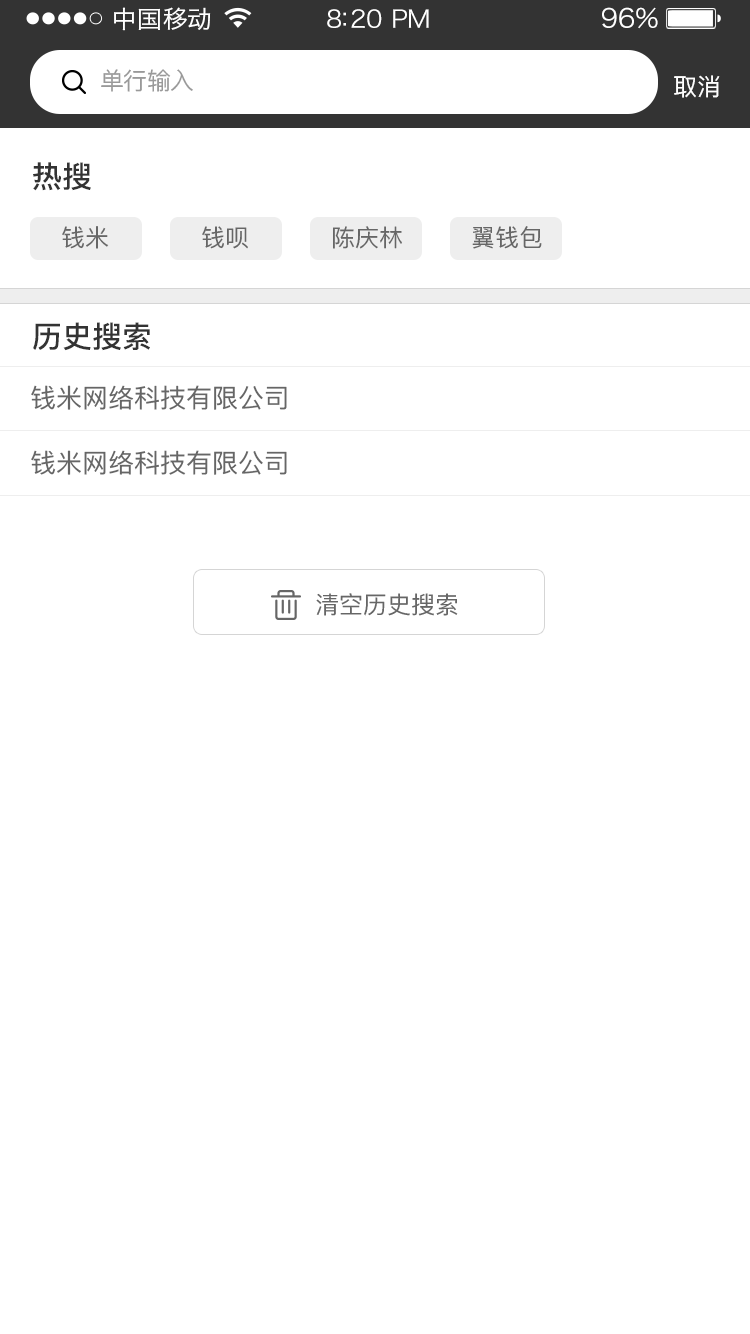
<style>
.page{position:relative;width:750px;height:1334px;background:#ffffff}
.page>*{position:absolute;margin:0}
.t1{font:24px "HiraginoSansGB-W3";letter-spacing:0.02em;color:#ffffff;scale:1.03 1}
.t2{font:24px "HiraginoSansGB-W3";letter-spacing:-0.02em;color:#ffffff;scale:1.03 1}
.t3{font:26.2px "HiraginoSansGB-W3";letter-spacing:-0.02em;color:#ffffff;scale:1.03 1}
.t4{font:24px "PingFangSC-Regular";letter-spacing:-0.02em;color:#999999}
.t5{font:24px "PingFangSC-Regular";letter-spacing:-0.02em;color:#ffffff}
.t6{font:30px "PingFangSC-Medium";color:#333333}
.t7{font:24px "PingFangSC-Regular";color:#666666}
.t8{font:26px "PingFangSC-Regular";color:#666666}
</style>
<div class="page">
<p class="t1" style="left:114px;top:7px;width:97px;height:24px">中国移动</p>
<p class="t2" style="left:327px;top:9px;width:102px;height:19px">8:20 PM</p>
<p class="t3" style="left:602px;top:7px;width:56px;height:22px">96%</p>
<p class="t4" style="left:101px;top:69px;width:92px;height:23px">单行输入</p>
<p class="t5" style="left:674px;top:75px;width:46px;height:23px">取消</p>
<p class="t6" style="left:33px;top:162px;width:58px;height:29px">热搜</p>
<p class="t7" style="left:62px;top:226px;width:47px;height:23px">钱米</p>
<p class="t7" style="left:202px;top:226px;width:46px;height:23px">钱呗</p>
<p class="t7" style="left:333px;top:226px;width:69px;height:23px">陈庆林</p>
<p class="t7" style="left:472px;top:226px;width:70px;height:23px">翼钱包</p>
<p class="t6" style="left:33px;top:322px;width:117px;height:29px">历史搜索</p>
<p class="t8" style="left:31px;top:385px;width:256px;height:25px">钱米网络科技有限公司</p>
<p class="t8" style="left:31px;top:450px;width:256px;height:25px">钱米网络科技有限公司</p>
<p class="t7" style="left:316px;top:593px;width:142px;height:23px">清空历史搜索</p>
</div>
